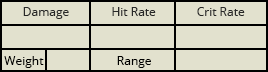
<style>
.page{position:relative;width:268px;height:72px;background:#e2e1ce}
.page>*{position:absolute;margin:0}
.t1{font:12px "OpenSans";color:#282828}
.t2{font:12px "OpenSans";color:#000000}
</style>
<div class="page">
<p class="t1" style="left:23px;top:7px;width:46px;height:12px">Damage</p>
<p class="t1" style="left:112px;top:7px;width:44px;height:9px">Hit Rate</p>
<p class="t1" style="left:197px;top:7px;width:48px;height:9px">Crit Rate</p>
<p class="t2" style="left:4px;top:56px;width:40px;height:12px">Weight</p>
<p class="t2" style="left:117px;top:56px;width:34px;height:12px">Range</p>
</div>
